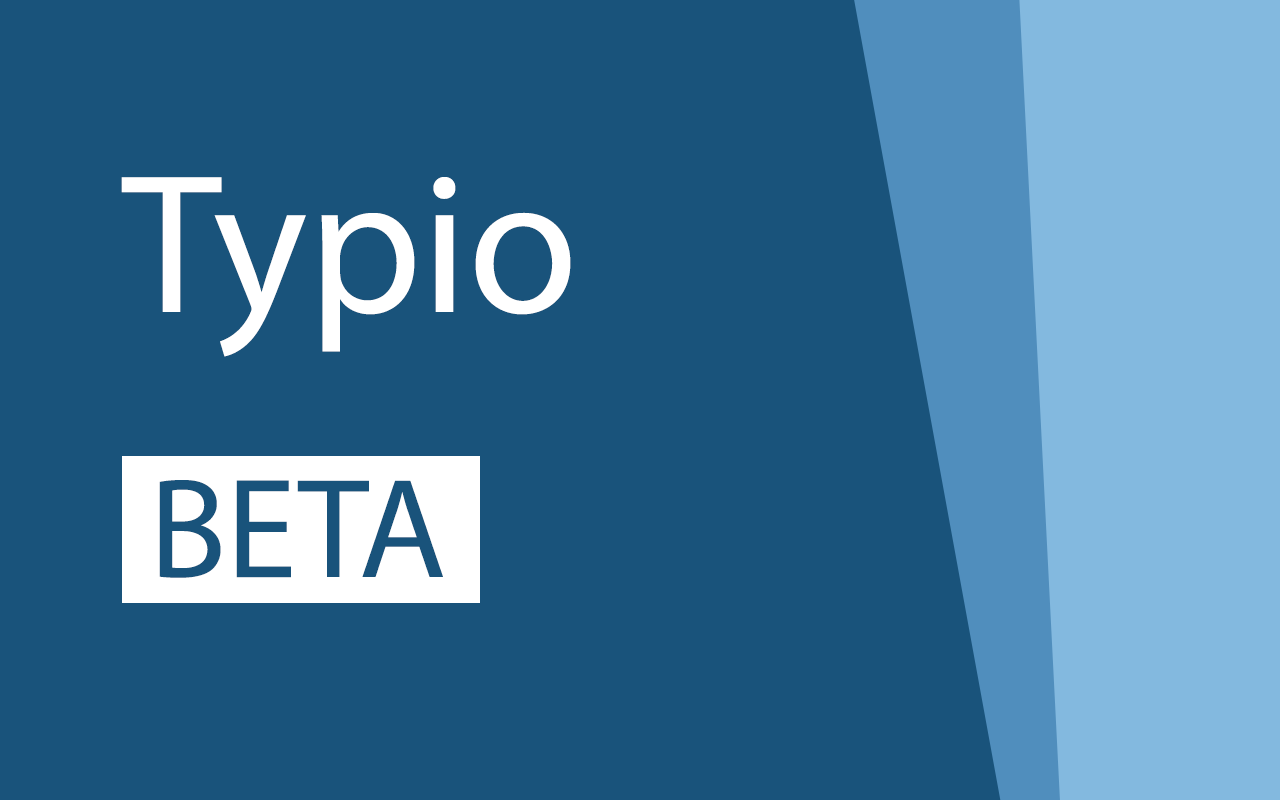
<style>
.page{position:relative;width:1280px;height:800px;background:#19537b}
.page>*{position:absolute;margin:0}
.t1{font:200px "MyriadPro-Regular";color:#ffffff}
.t2{font:142.7px "MyriadPro-Regular";color:#19537b}
</style>
<div class="page">
<p class="t1" style="left:121px;top:177px;width:450px;height:180px">Typio</p>
<p class="t2" style="left:159px;top:480px;width:284px;height:98px">BETA</p>
</div>
